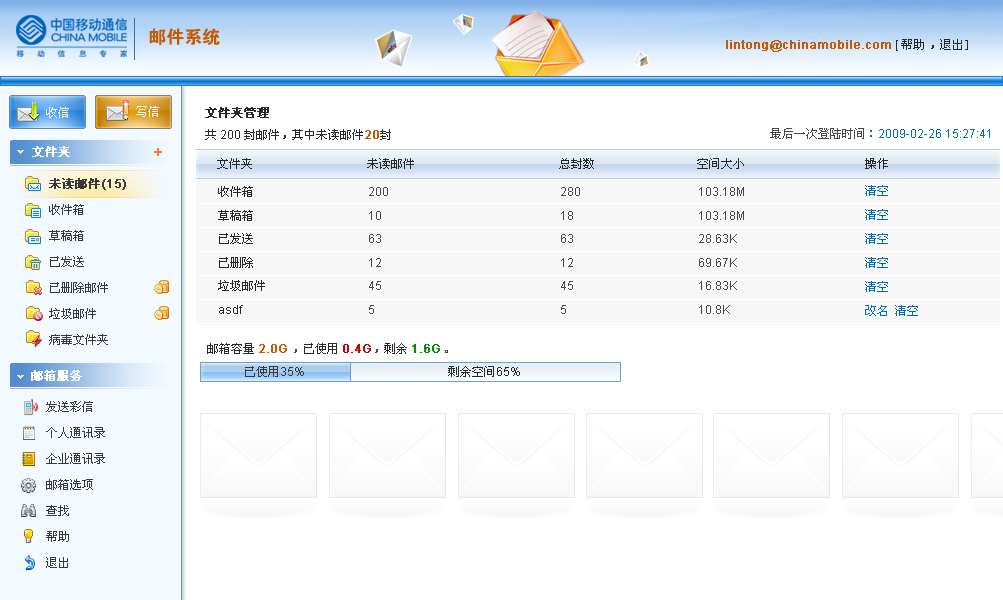
<style>
.page{position:relative;width:1003px;height:600px;background:#ffffff}
.page>*{position:absolute;margin:0}
.t1{font:18px "FZDHTJW--GB1-0";color:#c75900}
.t2{font:12px "ArialMT";color:#c75900;font-weight:bold}
.t3{font:12px "ArialMT";color:#282828}
.t4{font:12px "SimSun";color:#282828}
.t5{font:12px "SimSun";color:#ffffff}
.t6{font:12px/22px "SimSun";color:#282828}
.t7{font:12px/22px "SimSun";color:#282828;font-weight:bold}
.t8{font:12px/22px "ArialMT";color:#282828}
.t9{font:12px/22px "ArialMT";color:#c75900;font-weight:bold}
.t10{font:12px "ArialMT";color:#006cb4}
.t11{font:12px "SimSun";color:#474747}
.t12{font:12px "SimSun";color:#006cb4}
.t13{font:12px "SimSun";color:#ffffff;font-weight:bold}
.t14{font:12px/26px "SimSun";color:#393939}
.t15{font:12px/26px "SimSun";color:#393939;font-weight:bold}
.t16{font:12px/26px "ArialMT";color:#393939;font-weight:bold}
.t17{font:12px/23.9px "SimSun";color:#006cb4}
.t18{font:12px/23.5px "SimSun";color:#282828}
.t19{font:12px/23.5px "ArialMT";color:#282828}
.t20{font:12px/23.5px "ArialMT";color:#474747}
.t21{font:12px "ArialMT";color:#cc0000;font-weight:bold}
.t22{font:12px "ArialMT";color:#008f00;font-weight:bold}
.t23{font:12px "SimSun";color:#393939}
.t24{font:12px "ArialMT";color:#393939}
</style>
<div class="page">
<p class="t1" style="left:149px;top:28px;width:71px;height:17px">邮件系统</p>
<p class="t2" style="left:726px;top:39px;width:242px;height:13px">lintong@chinamobile.com <span class="t3">[ </span><span class="t4">帮助 ，退出]</span></p>
<p class="t5" style="left:46px;top:107px;width:23px;height:11px">收信</p>
<p class="t5" style="left:136px;top:106px;width:23px;height:11px">写信</p>
<p class="t6" style="left:205px;top:107px;width:186px;height:33px"><span class="t7">文件夹管理<br></span>共<span class="t8"> 200 </span>封邮件，其中未读邮件<span class="t9">20</span>封</p>
<p class="t10" style="left:770px;top:128px;width:220px;height:11px"><span class="t11">最后一次登陆时间</span><span class="t12">：</span>2009-02-26 15:27:41</p>
<p class="t13" style="left:32px;top:146px;width:38px;height:11px">文件夹</p>
<p class="t4" style="left:217px;top:158px;width:671px;height:11px">文件夹              未读邮件                      总封数               空间大小                   操作</p>
<p class="t14" style="left:49px;top:178px;width:77px;height:167px"><span class="t15">未读邮件</span><span class="t16">(15)<br></span>收件箱<br>草稿箱<br>已发送<br>已删除邮件      <br>垃圾邮件       <br>病毒文件夹</p>
<p class="t17" style="left:865px;top:185px;width:53px;height:131px">清空<br>清空<br>清空<br>清空<br>清空<br>改名 清空</p>
<p class="t18" style="left:218px;top:186px;width:47px;height:128px">收件箱　   　　   　　<br>草稿箱<br>已发送　　   　　   　　<br>已删除　   　　   　　<br>垃圾邮件<span class="t19"><br>asdf</span></p>
<p class="t20" style="left:369px;top:187px;width:19px;height:127px">200<br>10<br>63<br>12<br>45<br>5</p>
<p class="t20" style="left:561px;top:187px;width:19px;height:127px">280<br>18<br>63<br>12<br>45<br>5</p>
<p class="t20" style="left:699px;top:187px;width:45px;height:127px">103.18M<br>103.18M<br>28.63K<br>69.67K<br>16.83K<br>10.8K</p>
<p class="t4" style="left:207px;top:343px;width:241px;height:11px">邮箱容量 <span class="t2">2.0G </span><span class="t11">，</span>已使用 <span class="t21">0.4G</span><span class="t11">，</span>剩余 <span class="t22">1.6G </span><span class="t11">。</span></p>
<p class="t23" style="left:245px;top:366px;width:59px;height:11px">已使用<span class="t24">35%</span></p>
<p class="t4" style="left:448px;top:366px;width:72px;height:11px">剩余空间<span class="t3">65%</span></p>
<p class="t13" style="left:31px;top:370px;width:51px;height:11px">邮箱服务</p>
<p class="t14" style="left:46px;top:401px;width:59px;height:167px">发送彩信<br>个人通讯录<br>企业通讯录<br>邮箱选项<br>查找<br>帮助<br>退出</p>
</div>
